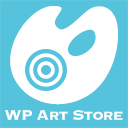
<style>
.page{position:relative;width:128px;height:128px;background:#55c3dc}
.page>*{position:absolute;margin:0}
.t1{font:18px "Copperplate-Bold";letter-spacing:-0.05em;color:#ffffff}
</style>
<div class="page">
<p class="t1" style="left:5px;top:110px;width:118px;height:10px">WP Art Store</p>
</div>
